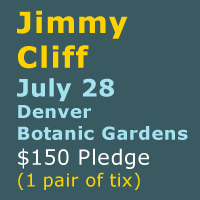
<style>
.page{position:relative;width:200px;height:200px;background:#395a61}
.page>*{position:absolute;margin:0}
.t1{font:18px "Verdana-Bold";letter-spacing:0.018em;color:#a3e2ee}
.t2{font:29px "Verdana-Bold";letter-spacing:0.018em;color:#fed200;font-weight:bold}
.t3{font:24px "Verdana-Bold";letter-spacing:0.018em;color:#a3e2ee}
.t4{font:21px "Verdana";letter-spacing:0.018em;color:#fdfdfc}
.t5{font:18px "Verdana";letter-spacing:0.018em;color:#fed200}
</style>
<div class="page">
<p class="t1" style="left:17px;top:10px;width:171px;height:180px"><span class="t2">Jimmy <br>Cliff<br></span><span class="t3">July 28 <br></span>Denver <br>Botanic Gardens<br><span class="t4">$150 Pledge<br></span><span class="t5">(1 pair of tix)</span></p>
</div>
